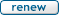
<style>
.page{position:relative;width:59px;height:15px;background:#ffffff}
.page>*{position:absolute;margin:0}
.t1{font:10.8px "TrebuchetMS";letter-spacing:0.025em;color:#006699;scale:1.11 1}
</style>
<div class="page">
<p class="t1" style="left:12px;top:5px;width:34px;height:6px">renew</p>
</div>
